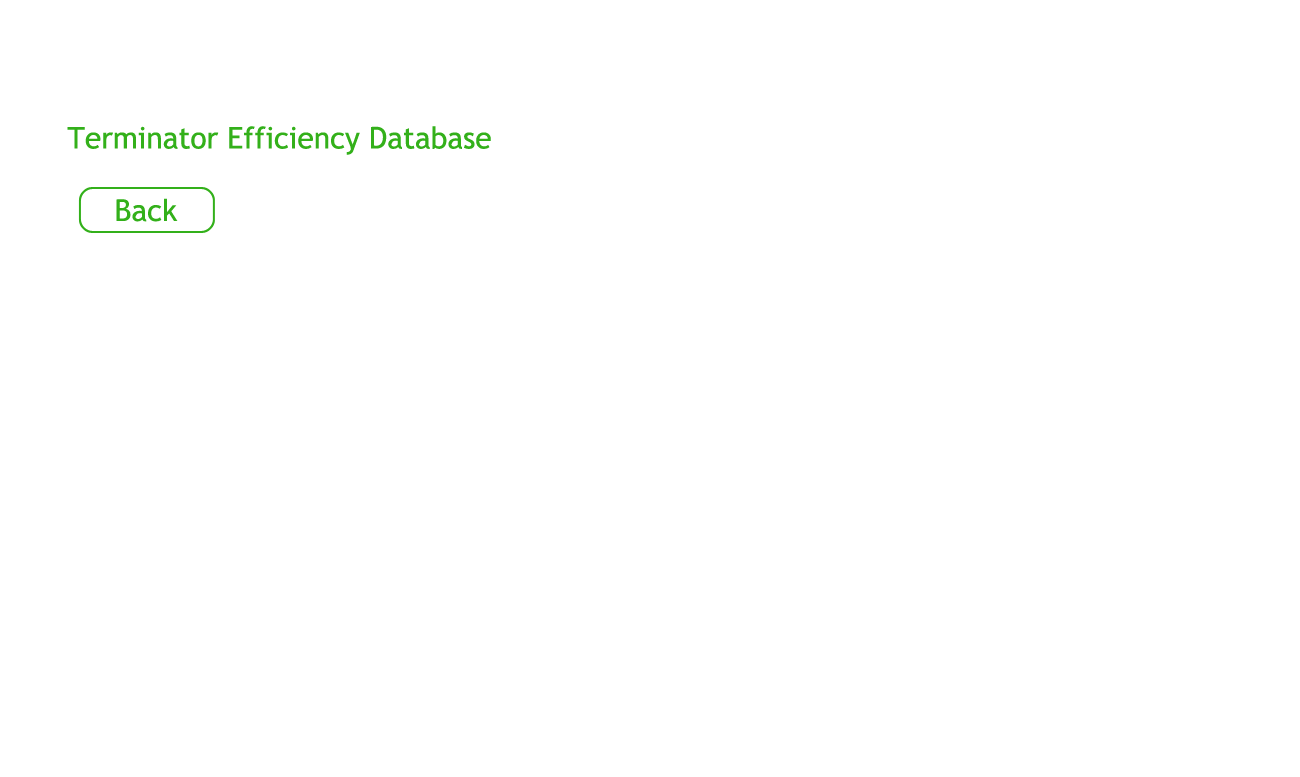
<style>
.page{position:relative;width:1300px;height:777px;background:#ffffff}
.page>*{position:absolute;margin:0}
.t1{font:30px "TrebuchetMS";color:#33b01a}
</style>
<div class="page">
<p class="t1" style="left:67px;top:126px;width:424px;height:29px">Terminator Efficiency Database</p>
<p class="t1" style="left:116px;top:198px;width:62px;height:24px">Back</p>
</div>
